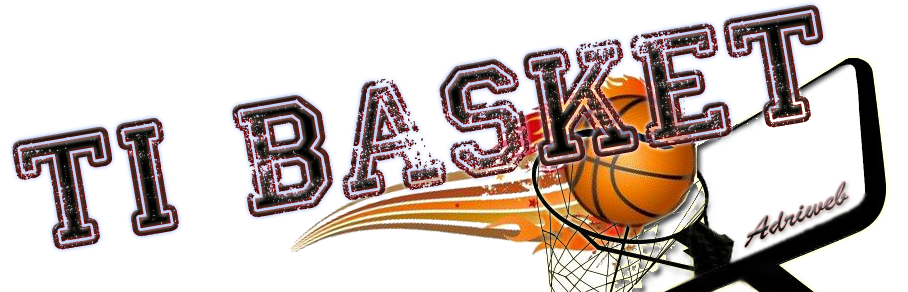
<style>
.page{position:relative;width:908px;height:292px;background:#ffffff}
.page>*{position:absolute;margin:0}
.t1{font:120px "Colleged"}
</style>
<div class="page">
<p class="t1" style="left:12px;top:5px;width:811px;height:245px;rotate:-10deg">TI   BASKET</p>
</div>
